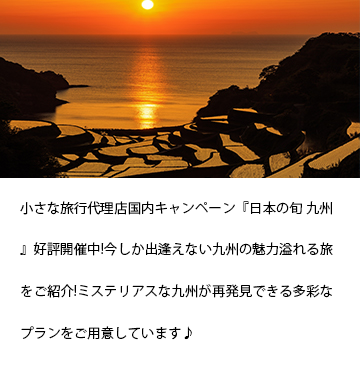
<style>
.page{position:relative;width:360px;height:370px;background:#ffffff}
.page>*{position:absolute;margin:0}
.t1{font:13.3px/41.7px "KozGoPr6N-Regular";letter-spacing:0.01em;color:#000000}
</style>
<div class="page">
<p class="t1" style="left:20px;top:201px;width:313px;height:139px">小さな旅行代理店国内キャンペーン『日本の旬 九州』好評開催中!今しか出逢えない九州の魅力溢れる旅をご紹介!ミステリアスな九州が再発見できる多彩なプランをご用意しています♪</p>
</div>
